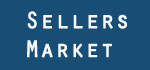
<style>
.page{position:relative;width:150px;height:70px;background:#184d76}
.page>*{position:absolute;margin:0}
.t1{font:24px "OratorStd";color:#f7f9fb;font-weight:bold}
</style>
<div class="page">
<p class="t1" style="left:27px;top:11px;width:100px;height:47px">Sellers<br>Market</p>
</div>
